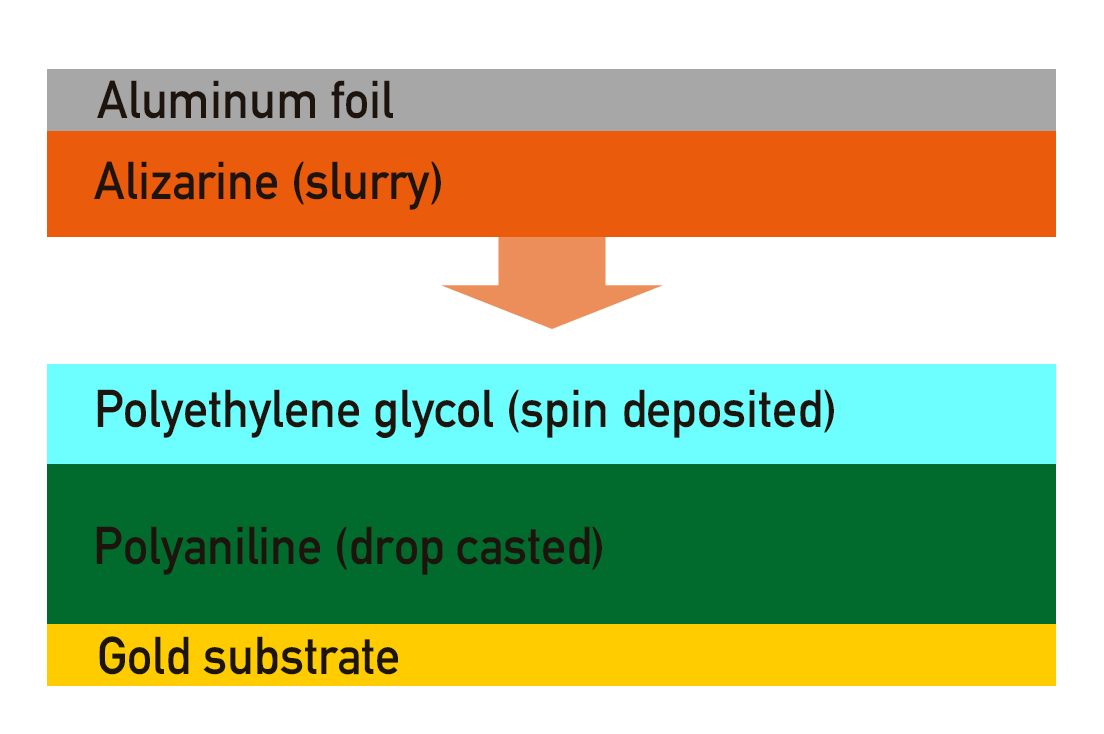
<style>
.page{position:relative;width:1104px;height:734px;background:#ffffff}
.page>*{position:absolute;margin:0}
.t1{font:52.5px "DIN-1451-Mittelschrift-Regular";color:#1d140d;scale:0.95 1}
</style>
<div class="page">
<p class="t1" style="left:97px;top:80px;width:296px;height:39px">Aluminum foil</p>
<p class="t1" style="left:94px;top:161px;width:347px;height:49px">Alizarine (slurry)</p>
<p class="t1" style="left:97px;top:389px;width:737px;height:49px">Polyethylene glycol (spin deposited)</p>
<p class="t1" style="left:96px;top:526px;width:506px;height:49px">Polyaniline (drop casted)</p>
<p class="t1" style="left:99px;top:636px;width:299px;height:39px">Gold substrate</p>
</div>
